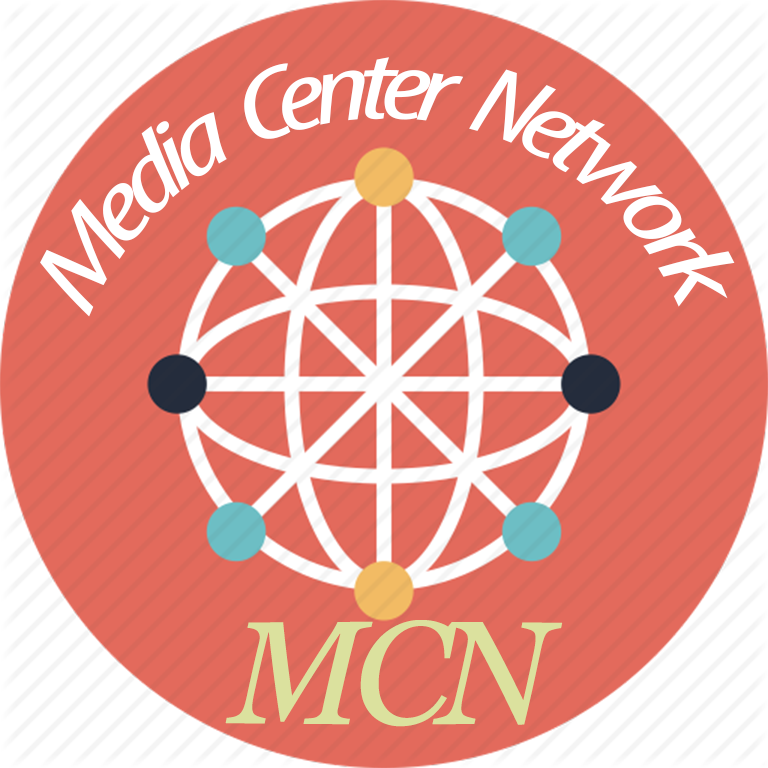
<style>
.page{position:relative;width:768px;height:768px;background:#e36a5c}
.page>*{position:absolute;margin:0}
.t1{font:100px/105px "MyriadPro-CondIt";letter-spacing:-0.075em;color:#ffffff}
.t2{font:145px "Georgia-Italic";letter-spacing:-0.075em;color:#dbe19e}
</style>
<div class="page">
<p class="t1" style="left:40px;top:57px;width:695px;height:260px;text-align:center">Media   Center   Network</p>
<p class="t2" style="left:225px;top:620px;width:338px;height:107px">MCN</p>
</div>
